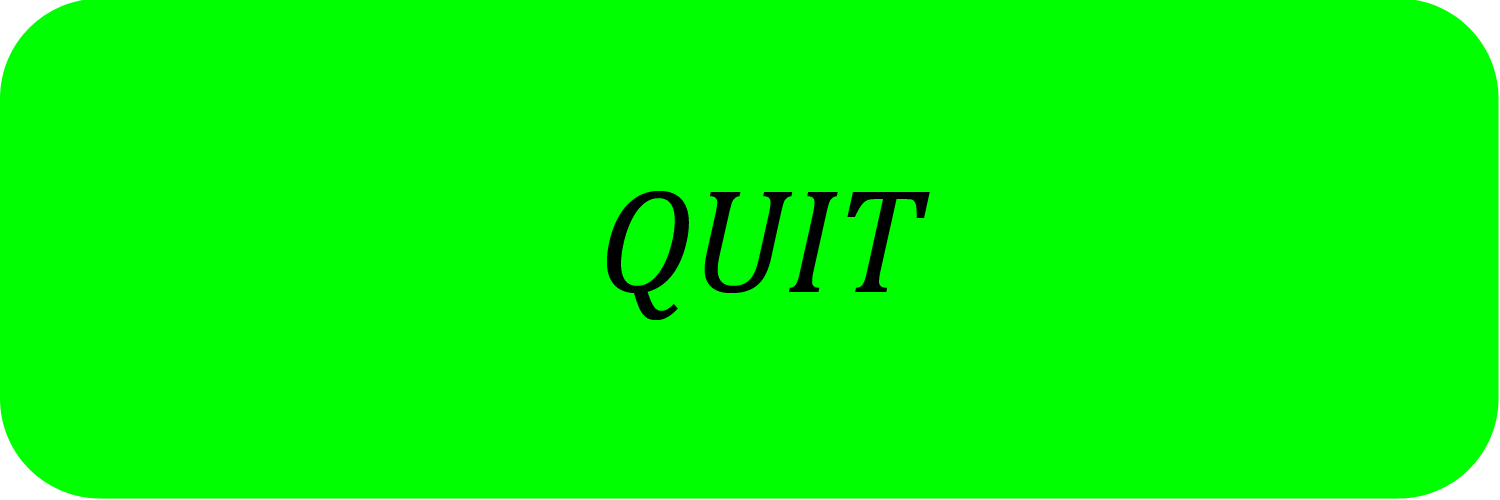
<style>
.page{position:relative;width:1500px;height:500px;background:#00ff00}
.page>*{position:absolute;margin:0}
.t1{font:150px "Cambria-Italic";color:#000000}
</style>
<div class="page">
<p class="t1" style="left:607px;top:191px;width:323px;height:129px">QUIT</p>
</div>
